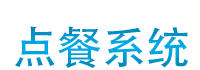
<style>
.page{position:relative;width:200px;height:70px;background:#ffffff}
.page>*{position:absolute;margin:0}
.t1{font:44.4px "AdobeHeitiStd-Regular";color:#009dd5}
</style>
<div class="page">
<p class="t1" style="left:15px;top:26px;width:173px;height:42px">点餐系统</p>
</div>
